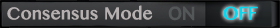
<style>
.page{position:relative;width:280px;height:28px}
.page>*{position:absolute;margin:0}
.t1{font:17px "OriyaMN";letter-spacing:0.005em;color:#b6b0b0;font-weight:bold}
.t2{font:18px "PTSans-Caption";letter-spacing:-0.055em;color:#545757;font-weight:bold;scale:1.05 1}
.t3{font:18px "OriyaMN";letter-spacing:-0.055em;color:#0ad6ed;font-weight:bold;scale:1.03 1}
</style>
<div class="page">
<p class="t1" style="left:7px;top:5px;width:146px;height:15px">Consensus Mode</p>
<p class="t2" style="left:168px;top:6px;width:27px;height:15px">ON</p>
<p class="t3" style="left:223px;top:6px;width:35px;height:14px">OFF</p>
<p class="t3" style="left:223px;top:6px;width:35px;height:14px">OFF</p>
</div>
